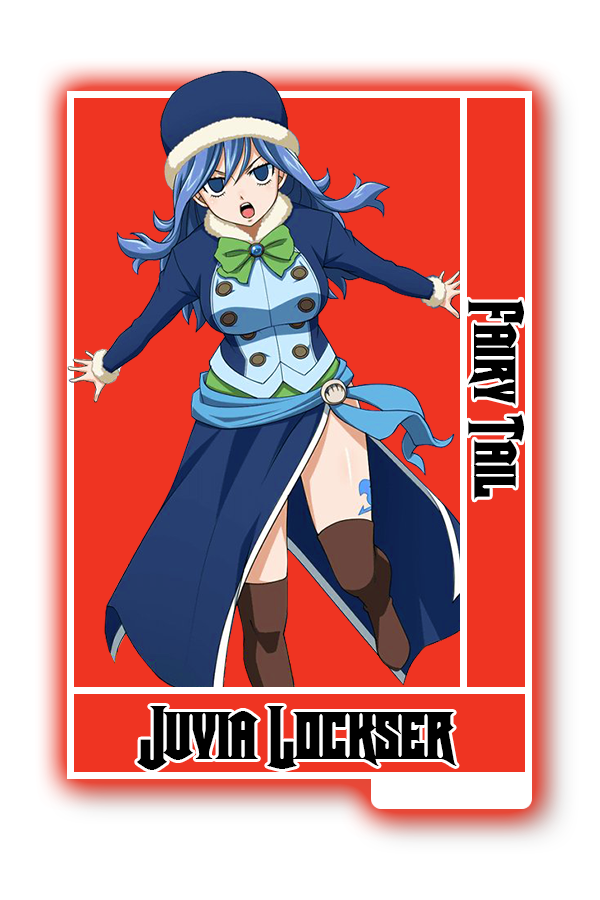
<style>
.page{position:relative;width:600px;height:900px;background:#ffffff}
.page>*{position:absolute;margin:0}
.t1{font:61.5px "Crown-Title";color:#000000}
.t2{font:70.1px "Crown-Title";color:#000000}
</style>
<div class="page">
<p class="t1" style="left:468px;top:299px;width:56px;height:201px;rotate:90deg">Fairy Tail</p>
<p class="t2" style="left:137px;top:706px;width:320px;height:64px">Juvia Lockser</p>
</div>
